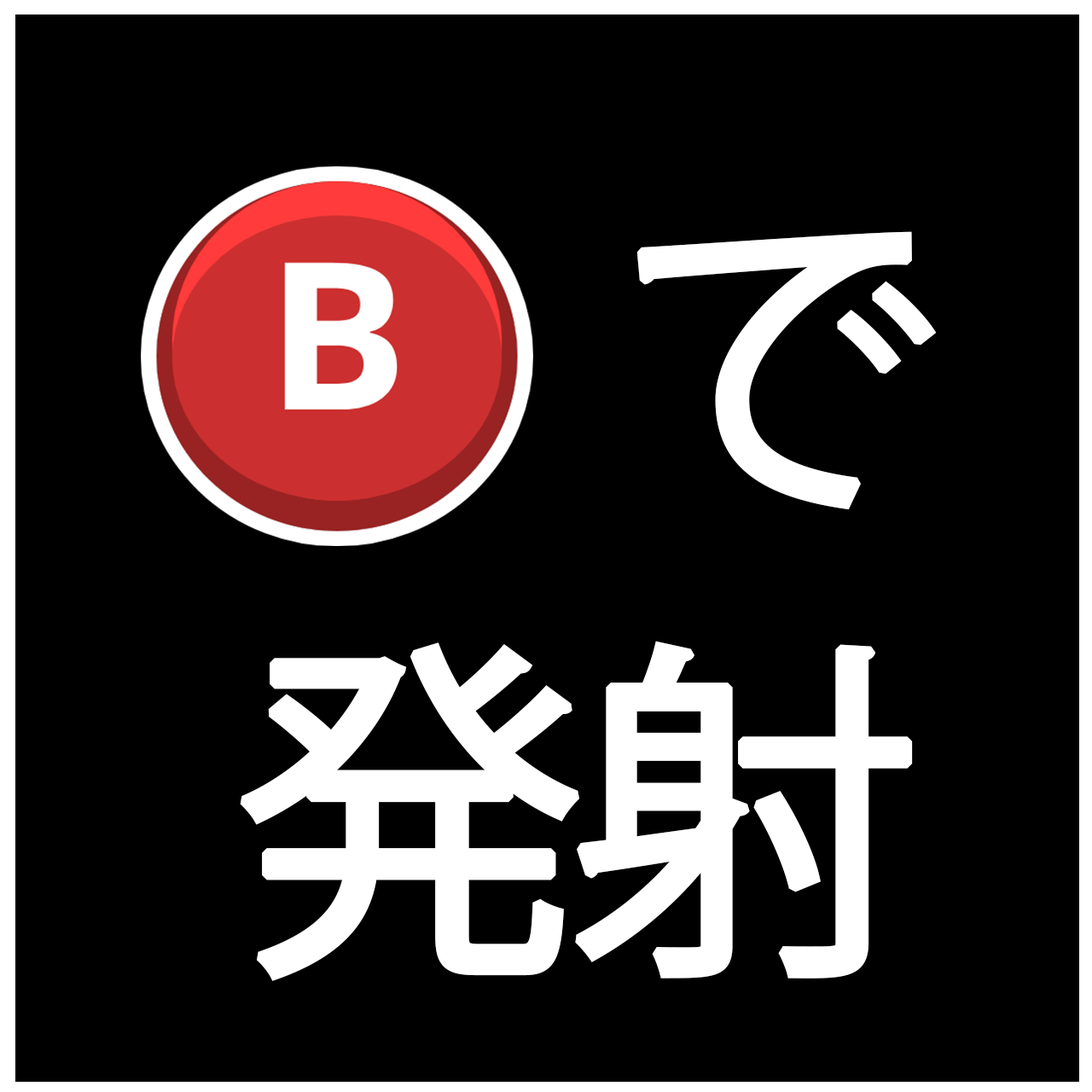
<style>
.page{position:relative;width:1092px;height:1092px;background:#000000}
.page>*{position:absolute;margin:0}
.t1{font:323.5px "KozGoPr6N-Regular";letter-spacing:-0.07em;color:#ffffff;font-weight:bold}
.t2{font:323.5px "Bauhaus93";letter-spacing:-0.07em;color:#ffffff;font-weight:bold}
.t3{font:350.8px "KozGoPr6N-Regular";letter-spacing:-0.07em;color:#ffffff;font-weight:bold}
</style>
<div class="page">
<p class="t1" style="left:636px;top:231px;width:301px;height:279px"><span class="t2"> </span>で</p>
<p class="t3" style="left:240px;top:641px;width:673px;height:340px">発射</p>
</div>
